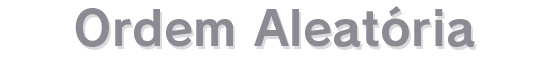
<style>
.page{position:relative;width:550px;height:60px;background:#ffffff}
.page>*{position:absolute;margin:0}
.t1{font:48px "RodinPro-B";letter-spacing:0.002em;color:#8c8b93}
</style>
<div class="page">
<p class="t1" style="left:75px;top:6px;width:400px;height:41px">Ordem Aleatória</p>
</div>
